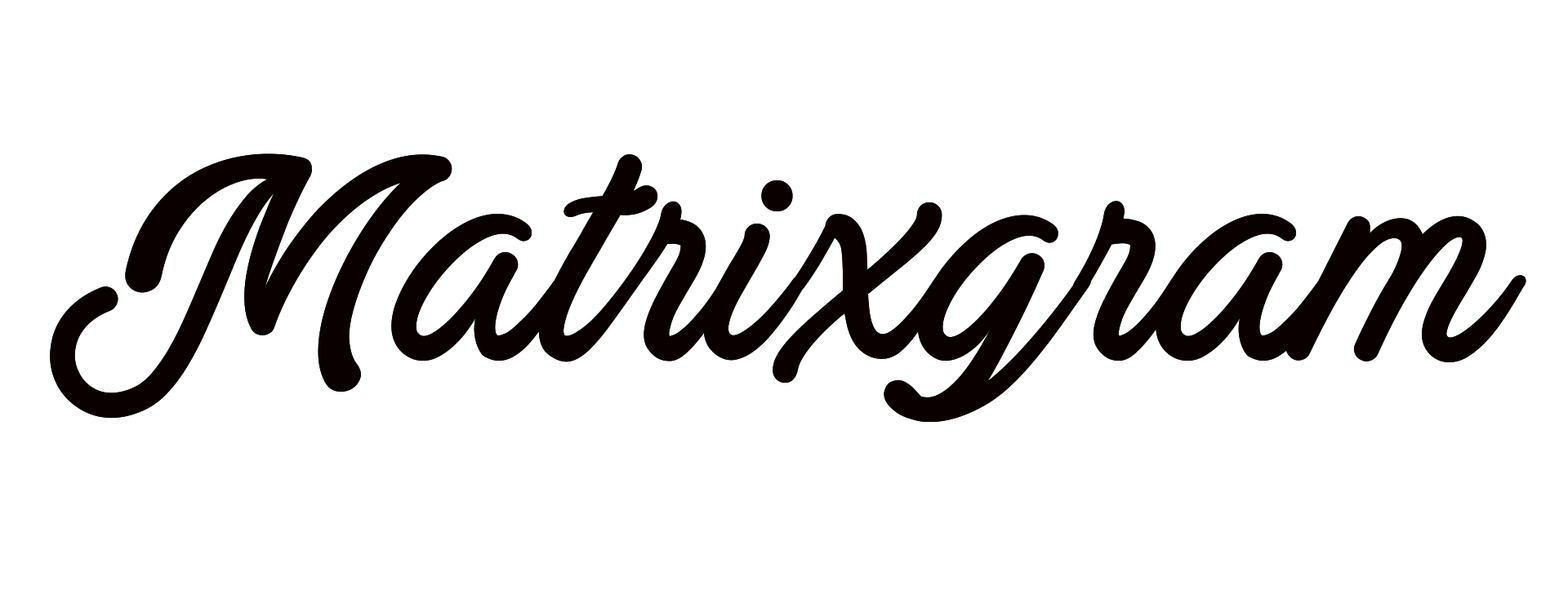
<style>
.page{position:relative;width:1568px;height:612px;background:#ffffff}
.page>*{position:absolute;margin:0}
.t1{font:330.6px "ActoniaPERSONALUSE";color:#0a0000}
</style>
<div class="page">
<p class="t1" style="left:50px;top:154px;width:1476px;height:268px">Matrixgram</p>
<p class="t1" style="left:50px;top:154px;width:1476px;height:268px">Matrixgram</p>
</div>
